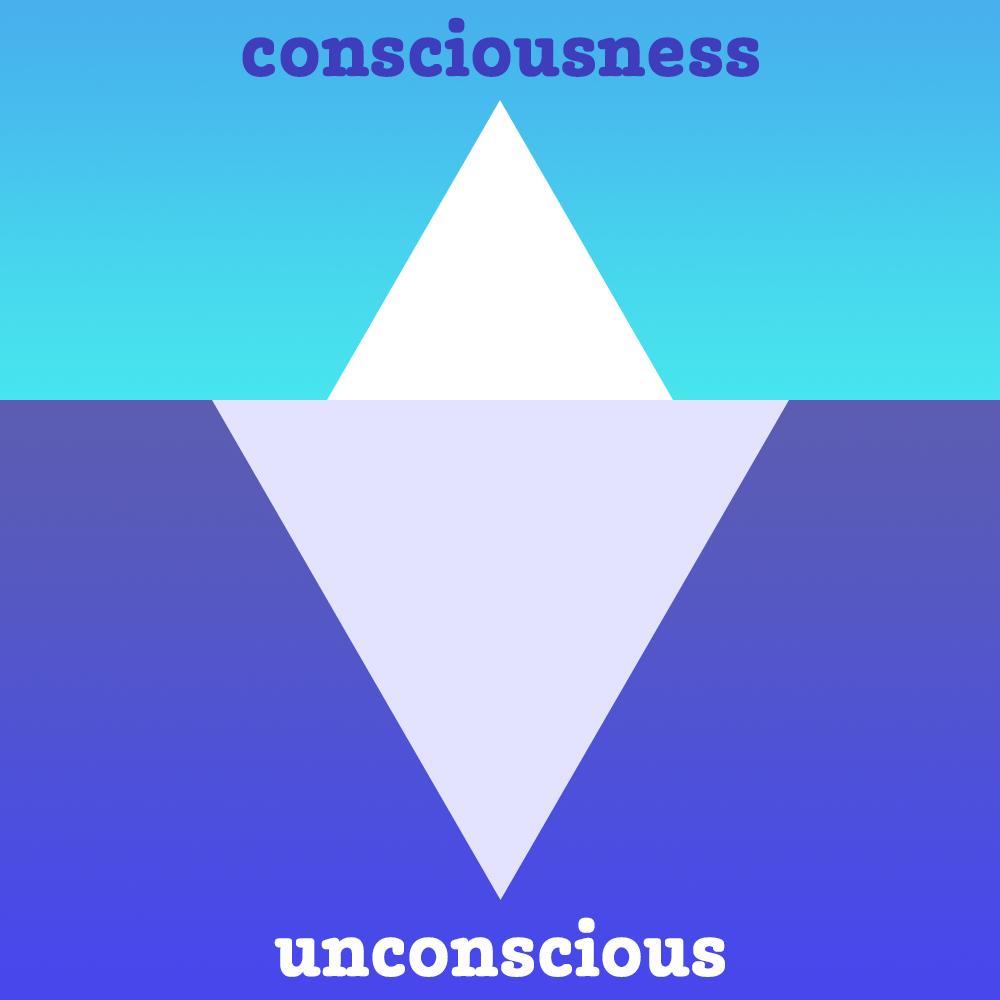
<style>
.page{position:relative;width:1000px;height:1000px}
.page>*{position:absolute;margin:0}
.t1{font:75px "Chubbo-Bold";color:#3e3ebc;font-weight:bold}
.t2{font:75px "Chubbo-Bold";color:#ffffff;font-weight:bold}
</style>
<div class="page">
<p class="t1" style="left:242px;top:17px;width:517px;height:60px">consciousness</p>
<p class="t2" style="left:274px;top:917px;width:451px;height:60px">unconscious</p>
</div>
